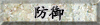
<style>
.page{position:relative;width:100px;height:25px}
.page>*{position:absolute;margin:0}
.t1{font:16px "STKaiti";color:#010101;font-weight:bold}
</style>
<div class="page">
<p class="t1" style="left:34px;top:5px;width:30px;height:16px">防御</p>
</div>
